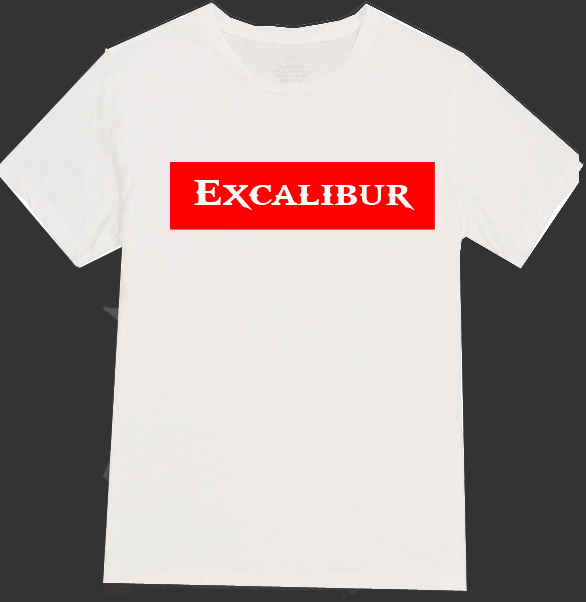
<style>
.page{position:relative;width:586px;height:602px;background:#333333}
.page>*{position:absolute;margin:0}
.t1{font:40px "GodOfWar";color:#ffffff}
</style>
<div class="page">
<p class="t1" style="left:194px;top:180px;width:221px;height:30px">Excalibur</p>
</div>
